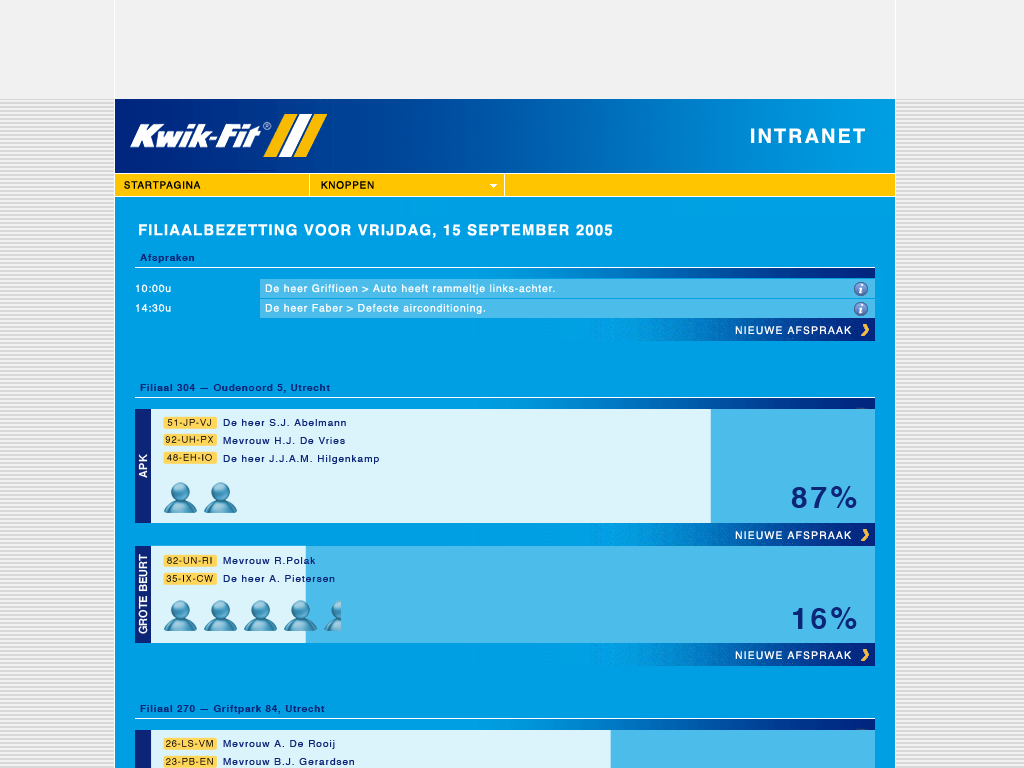
<style>
.page{position:relative;width:1024px;height:768px;background:#009ee3}
.page>*{position:absolute;margin:0}
.t1{font:20px "Helvetica-Bold";letter-spacing:0.1em;color:#ffffff}
.t2{font:10px "Helvetica";letter-spacing:0.075em;color:#000000}
.t3{font:15px "Helvetica-Bold";letter-spacing:0.075em;color:#ffffff}
.t4{font:9.9px "Helvetica-Bold";letter-spacing:0.075em;color:#0c2577}
.t5{font:10.5px/19.6px "Helvetica";letter-spacing:0.075em;color:#ffffff}
.t6{font:10.5px "Helvetica";letter-spacing:0.1em;color:#ffffff}
.t7{font:9.2px "Helvetica";letter-spacing:0.1em}
.t8{font:10px/18px "Helvetica";letter-spacing:0.1em;color:#0c2577}
.t9{font:9.2px "Helvetica";letter-spacing:0.1em;color:#000000}
.t10{font:11px "Helvetica-Bold";color:#ffffff}
.t11{font:30px "Helvetica-Bold";letter-spacing:0.1em;color:#0c2577}
</style>
<div class="page">
<p class="t1" style="left:751px;top:128px;width:114px;height:15px">INTRANET</p>
<p class="t2" style="left:124px;top:181px;width:77px;height:8px">STARTPAGINA</p>
<p class="t2" style="left:321px;top:181px;width:53px;height:8px">KNOPPEN</p>
<p class="t3" style="left:139px;top:224px;width:474px;height:14px">FILIAALBEZETTING VOOR VRIJDAG, 15 SEPTEMBER 2005</p>
<p class="t4" style="left:140px;top:254px;width:55px;height:9px">Afspraken</p>
<p class="t5" style="left:136px;top:284px;width:35px;height:28px">10:00u<br>14:30u</p>
<p class="t5" style="left:265px;top:284px;width:290px;height:30px">De heer Griffioen &gt; Auto heeft rammeltje links-achter.<br>De heer Faber &gt; Defecte airconditioning.</p>
<p class="t6" style="left:735px;top:326px;width:117px;height:9px">NIEUWE AFSPRAAK</p>
<p class="t4" style="left:140px;top:384px;width:190px;height:9px">Filiaal 304 — Oudenoord 5, Utrecht</p>
<p class="t7" style="left:167px;top:419px;width:44px;height:7px">51-JP-VJ</p>
<p class="t8" style="left:223px;top:419px;width:156px;height:45px">De heer S.J. Abelmann<br>Mevrouw H.J. De Vries<br>De heer J.J.A.M. Hilgenkamp</p>
<p class="t9" style="left:165px;top:436px;width:48px;height:7px">92-UH-PX</p>
<p class="t10" style="left:138px;top:454px;width:10px;height:24px;rotate:-90deg">APK</p>
<p class="t7" style="left:167px;top:454px;width:45px;height:7px">48-EH-IO</p>
<p class="t11" style="left:791px;top:486px;width:66px;height:22px">87%</p>
<p class="t6" style="left:735px;top:531px;width:117px;height:9px">NIEUWE AFSPRAAK</p>
<p class="t10" style="left:138px;top:554px;width:10px;height:80px;rotate:-90deg">GROTE BEURT</p>
<p class="t7" style="left:167px;top:557px;width:45px;height:7px">82-UN-RI</p>
<p class="t8" style="left:223px;top:557px;width:112px;height:25px">Mevrouw R.Polak<br>De heer A. Pietersen</p>
<p class="t9" style="left:166px;top:575px;width:47px;height:7px">35-IX-CW</p>
<p class="t11" style="left:793px;top:607px;width:64px;height:22px">16%</p>
<p class="t6" style="left:735px;top:651px;width:117px;height:9px">NIEUWE AFSPRAAK</p>
<p class="t4" style="left:140px;top:705px;width:185px;height:9px">Filiaal 270 — Griftpark 84, Utrecht</p>
<p class="t7" style="left:166px;top:740px;width:47px;height:7px">26-LS-VM</p>
<p class="t7" style="left:166px;top:758px;width:47px;height:7px">23-PB-EN</p>
</div>
